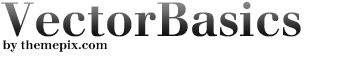
<style>
.page{position:relative;width:360px;height:59px;background:#ffffff}
.page>*{position:absolute;margin:0}
.t1{font:47px "Justus-Bold"}
.t2{font:12px "Justus-Bold";color:#090909}
</style>
<div class="page">
<p class="t1" style="left:1px;top:1px;width:300px;height:36px">VectorBasics</p>
<p class="t2" style="left:3px;top:40px;width:105px;height:12px">by themepix.com</p>
</div>
